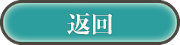
<style>
.page{position:relative;width:180px;height:45px;background:#2c9e9e}
.page>*{position:absolute;margin:0}
.t1{font:24px "RyuminPr6N-ExBold";color:#fff9f3}
</style>
<div class="page">
<p class="t1" style="left:67px;top:13px;width:45px;height:22px">返回</p>
</div>
